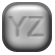
<style>
.page{position:relative;width:55px;height:55px;background:#ffffff}
.page>*{position:absolute;margin:0}
.t1{font:28px "ArialMT";color:#979797}
</style>
<div class="page">
<p class="t1" style="left:9px;top:17px;width:35px;height:20px">YZ</p>
</div>
